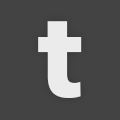
<style>
.page{position:relative;width:120px;height:120px;background:#434343}
.page>*{position:absolute;margin:0}
.t1{font:120px "AvenirNext-Bold";color:#ebebeb}
</style>
<div class="page">
<p class="t1" style="left:38px;top:21px;width:44px;height:77px">t</p>
</div>
